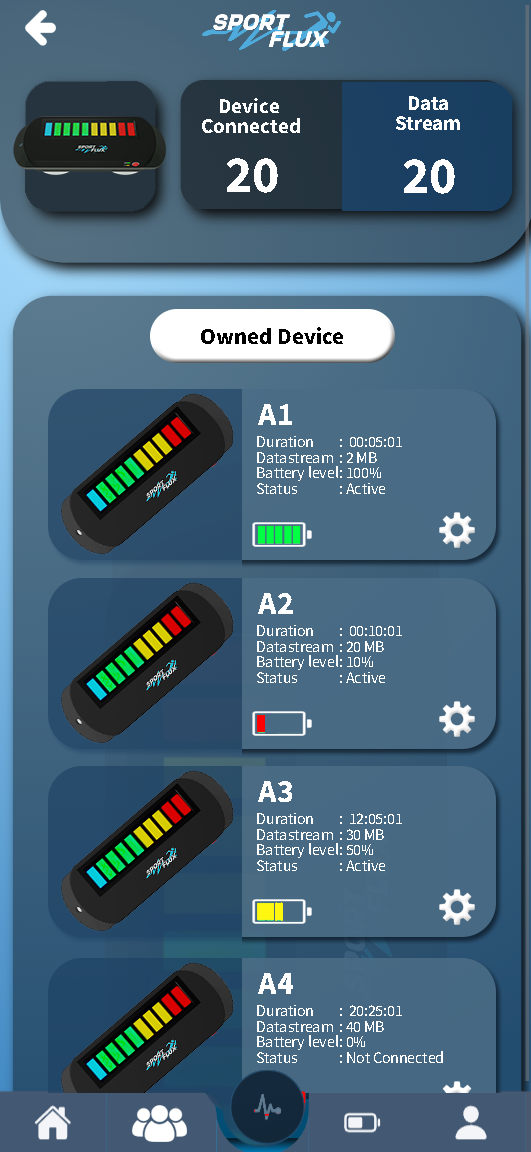
<style>
.page{position:relative;width:531px;height:1152px}
.page>*{position:absolute;margin:0}
.t1{font:21px/20px "SourceSansPro-Bold";color:#ffffff}
.t2{font:52px "SourceSansPro-Bold";color:#ffffff}
.t3{font:23px "SourceSansPro-Bold";color:#000000}
.t4{font:32.4px "SourceSansPro-Bold";color:#ffffff}
.t5{font:16.2px/15.4px "SourceSansPro-Regular";color:#ffffff}
</style>
<div class="page">
<p class="t1" style="left:202px;top:98px;width:98px;height:35px;text-align:center">Device <br>Connected</p>
<p class="t1" style="left:396px;top:96px;width:64px;height:34px;text-align:center">Data<br>Stream</p>
<p class="t2" style="left:227px;top:158px;width:51px;height:35px">20</p>
<p class="t2" style="left:404px;top:159px;width:51px;height:35px">20</p>
<p class="t3" style="left:201px;top:327px;width:142px;height:17px">Owned Device</p>
<p class="t4" style="left:258px;top:404px;width:34px;height:21px">A1</p>
<p class="t5" style="left:257px;top:436px;width:145px;height:58px;text-align:right">Duration  :  00:05:01<br>Datastream  : 2 MB<br>Battery level : 100%<br>Status  : Active</p>
<p class="t4" style="left:258px;top:593px;width:35px;height:21px">A2</p>
<p class="t5" style="left:257px;top:625px;width:145px;height:58px;text-align:right">Duration  :  00:10:01<br>Datastream  : 20 MB<br>Battery level : 10%<br>Status  : Active</p>
<p class="t4" style="left:258px;top:781px;width:34px;height:21px">A3</p>
<p class="t5" style="left:257px;top:813px;width:145px;height:58px;text-align:right">Duration  :  12:05:01<br>Datastream  : 30 MB<br>Battery level : 50%<br>Status  : Active</p>
<p class="t4" style="left:258px;top:973px;width:35px;height:21px">A4</p>
<p class="t5" style="left:257px;top:1005px;width:186px;height:58px;text-align:right">Duration  :  20:25:01<br>Datastream  : 40 MB<br>Battery level : 0%<br>Status  : Not Connected</p>
</div>
